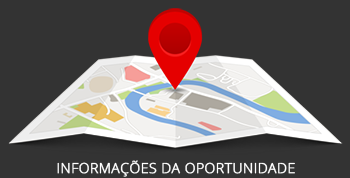
<style>
.page{position:relative;width:350px;height:178px;background:#333333}
.page>*{position:absolute;margin:0}
.t1{font:14px "OpenSans-Light";letter-spacing:0.01em;color:#ffffff;font-weight:bold}
</style>
<div class="page">
<p class="t1" style="left:57px;top:160px;width:238px;height:17px">INFORMAÇÕES DA OPORTUNIDADE</p>
</div>
